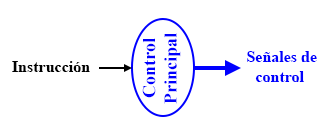
<style>
.page{position:relative;width:329px;height:136px;background:#ffffff}
.page>*{position:absolute;margin:0}
.t1{font:18px "TimesNewRomanPS-BoldMT";color:#0000ff}
.t2{font:16px "TimesNewRomanPS-BoldMT";color:#0000ff}
.t3{font:16px "TimesNewRomanPS-BoldMT";color:#000000}
</style>
<div class="page">
<p class="t1" style="left:142px;top:33px;width:39px;height:71px;text-align:center;rotate:-90deg">Control<br>Principal</p>
<p class="t2" style="left:247px;top:51px;width:70px;height:31px;text-align:center">Señales de <br>control</p>
<p class="t3" style="left:12px;top:61px;width:78px;height:11px">Instrucción</p>
</div>
